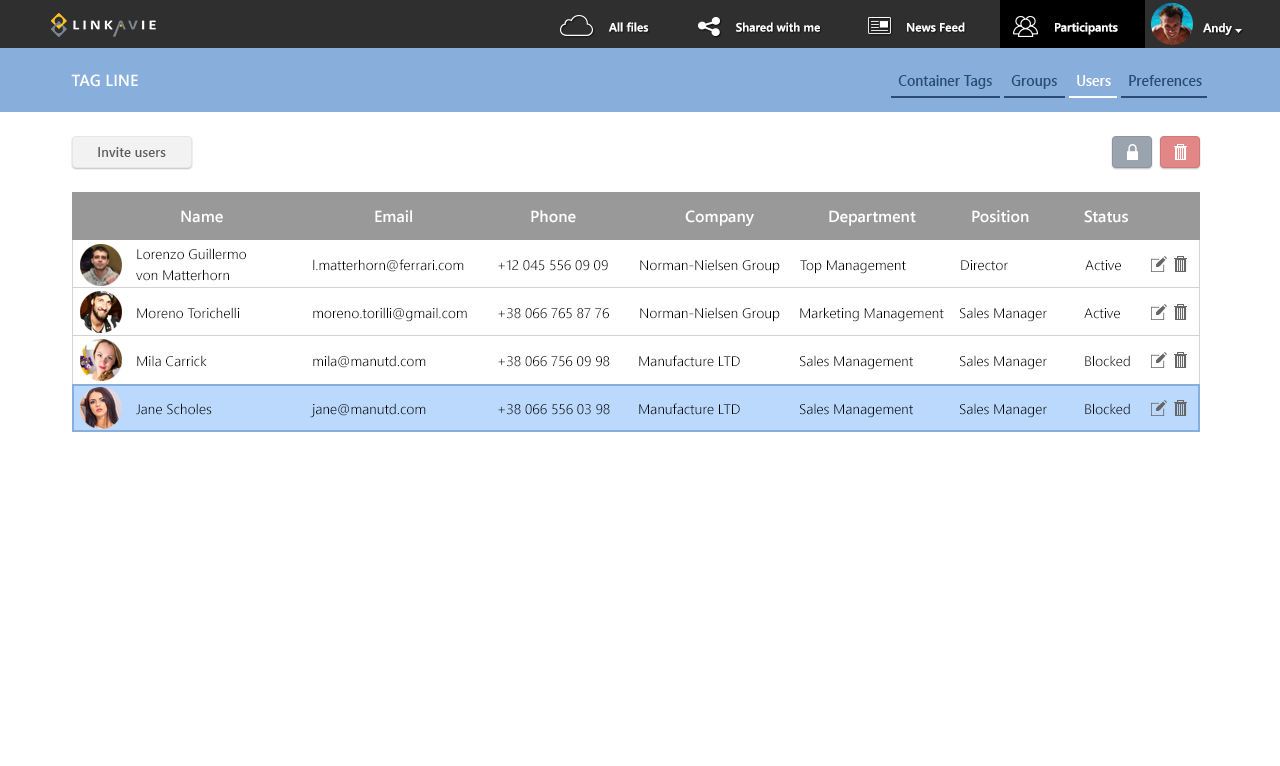
<style>
.page{position:relative;width:1280px;height:766px;background:#ffffff}
.page>*{position:absolute;margin:0}
.t1{font:12px "WeblySleekUISemibold";color:#ffffff}
.t2{font:16px "WeblySleekUISemibold";color:#ffffff;text-transform:uppercase}
.t3{font:14.7px "WeblySleekUISemibold";color:#2a4c73;scale:0.95 1}
.t4{font:14.7px "WeblySleekUISemibold";color:#ffffff;scale:0.95 1}
.t5{font:14px "WeblySleekUISemibold";color:#5d5d5d;scale:0.95 1}
.t6{font:16px "WeblySleekUISemibold";color:#ffffff}
.t7{font:14px/21px "WeblySleekUISemilight";color:#000000}
.t8{font:14px "WeblySleekUISemilight";color:#000000}
</style>
<div class="page">
<p class="t1" style="left:609px;top:22px;width:40px;height:10px">All files</p>
<p class="t1" style="left:736px;top:22px;width:84px;height:10px">Shared with me</p>
<p class="t1" style="left:907px;top:22px;width:58px;height:10px">News Feed</p>
<p class="t1" style="left:1055px;top:22px;width:63px;height:13px">Participants</p>
<p class="t1" style="left:1203px;top:23px;width:29px;height:12px">Andy</p>
<p class="t2" style="left:71px;top:74px;width:67px;height:13px">Tag line</p>
<p class="t3" style="left:898px;top:75px;width:94px;height:14px">Container Tags</p>
<p class="t3" style="left:1011px;top:75px;width:46px;height:14px">Groups</p>
<p class="t4" style="left:1077px;top:75px;width:34px;height:11px">Users</p>
<p class="t3" style="left:1129px;top:75px;width:73px;height:11px">Preferences</p>
<p class="t5" style="left:98px;top:147px;width:68px;height:10px">Invite users</p>
<p class="t6" style="left:181px;top:210px;width:42px;height:13px">Name</p>
<p class="t6" style="left:375px;top:210px;width:37px;height:13px">Email</p>
<p class="t6" style="left:531px;top:210px;width:45px;height:13px">Phone</p>
<p class="t6" style="left:685px;top:210px;width:69px;height:16px">Company</p>
<p class="t6" style="left:829px;top:210px;width:87px;height:16px">Department</p>
<p class="t6" style="left:972px;top:210px;width:57px;height:13px">Position</p>
<p class="t6" style="left:1084px;top:210px;width:44px;height:13px">Status</p>
<p class="t7" style="left:136px;top:248px;width:110px;height:33px">Lorenzo Guillermo <br>von Matterhorn</p>
<p class="t8" style="left:313px;top:259px;width:151px;height:13px">l.matterhorn@ferrari.com</p>
<p class="t8" style="left:498px;top:260px;width:110px;height:11px">+12 045 556 09 09</p>
<p class="t8" style="left:640px;top:259px;width:140px;height:15px">Norman-Nielsen Group</p>
<p class="t8" style="left:800px;top:260px;width:106px;height:14px">Top Management</p>
<p class="t8" style="left:961px;top:260px;width:47px;height:11px">Director</p>
<p class="t8" style="left:1085px;top:260px;width:36px;height:11px">Active</p>
<p class="t8" style="left:137px;top:307px;width:103px;height:12px">Moreno Torichelli</p>
<p class="t8" style="left:313px;top:307px;width:154px;height:15px">moreno.torilli@gmail.com</p>
<p class="t8" style="left:498px;top:308px;width:111px;height:11px">+38 066 765 87 76</p>
<p class="t8" style="left:640px;top:307px;width:140px;height:15px">Norman-Nielsen Group</p>
<p class="t8" style="left:800px;top:307px;width:144px;height:15px">Marketing Management</p>
<p class="t8" style="left:960px;top:307px;width:87px;height:15px">Sales Manager</p>
<p class="t8" style="left:1084px;top:308px;width:36px;height:11px">Active</p>
<p class="t8" style="left:137px;top:355px;width:70px;height:12px">Mila Carrick</p>
<p class="t8" style="left:313px;top:355px;width:113px;height:13px">mila@manutd.com</p>
<p class="t8" style="left:498px;top:356px;width:112px;height:11px">+38 066 756 09 98</p>
<p class="t8" style="left:639px;top:355px;width:101px;height:12px">Manufacture LTD</p>
<p class="t8" style="left:800px;top:355px;width:113px;height:15px">Sales Management</p>
<p class="t8" style="left:960px;top:355px;width:87px;height:15px">Sales Manager</p>
<p class="t8" style="left:1085px;top:355px;width:45px;height:12px">Blocked</p>
<p class="t8" style="left:136px;top:403px;width:76px;height:12px">Jane Scholes</p>
<p class="t8" style="left:310px;top:403px;width:116px;height:15px">jane@manutd.com</p>
<p class="t8" style="left:498px;top:404px;width:112px;height:11px">+38 066 556 03 98</p>
<p class="t8" style="left:639px;top:403px;width:101px;height:12px">Manufacture LTD</p>
<p class="t8" style="left:800px;top:403px;width:113px;height:15px">Sales Management</p>
<p class="t8" style="left:960px;top:403px;width:87px;height:15px">Sales Manager</p>
<p class="t8" style="left:1085px;top:403px;width:45px;height:12px">Blocked</p>
</div>
